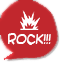
<style>
.page{position:relative;width:60px;height:62px;background:#c1272d}
.page>*{position:absolute;margin:0}
.t1{font:16px "SuplexmentaryComicNC";color:#ffffff;scale:0.8 1}
</style>
<div class="page">
<p class="t1" style="left:8px;top:33px;width:43px;height:12px">ROCK!!!</p>
</div>
